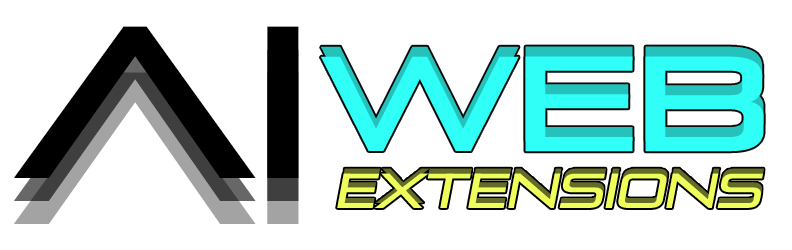
<style>
.page{position:relative;width:792px;height:250px;background:#ffffff}
.page>*{position:absolute;margin:0}
.t1{font:215.2px "PirulenRg-Regular";letter-spacing:-0.02em;color:#000000;scale:1.09 1}
.t2{font:215.2px "PirulenRg-Regular";letter-spacing:-0.02em;scale:1.09 1}
.t3{font:133.8px "PirulenRg-Regular";letter-spacing:-0.02em;scale:1.1 1}
.t4{font:133.8px "PirulenRg-Regular";letter-spacing:-0.02em;color:#2ffff7;scale:1.1 1}
.t5{font:49.9px "PirulenRg-Regular";letter-spacing:-0.02em;color:#eeff5c}
.t6{font:49.9px "PirulenRg-Regular";letter-spacing:-0.02em}
</style>
<div class="page">
<p class="t1" style="left:14px;top:26px;width:285px;height:152px">ai</p>
<p class="t1" style="left:14px;top:26px;width:285px;height:152px">aI</p>
<p class="t2" style="left:12px;top:49px;width:285px;height:152px">ai</p>
<p class="t2" style="left:14px;top:49px;width:285px;height:152px">ai</p>
<p class="t3" style="left:321px;top:46px;width:443px;height:96px">web</p>
<p class="t3" style="left:321px;top:46px;width:443px;height:96px">web</p>
<p class="t4" style="left:321px;top:56px;width:443px;height:96px">web</p>
<p class="t4" style="left:321px;top:56px;width:443px;height:96px">web</p>
<p class="t2" style="left:14px;top:72px;width:285px;height:152px">ai</p>
<p class="t2" style="left:14px;top:72px;width:285px;height:152px">ai</p>
<p class="t5" style="left:337px;top:173px;width:426px;height:35px">extensions</p>
<p class="t6" style="left:338px;top:168px;width:426px;height:35px">extensions</p>
</div>
